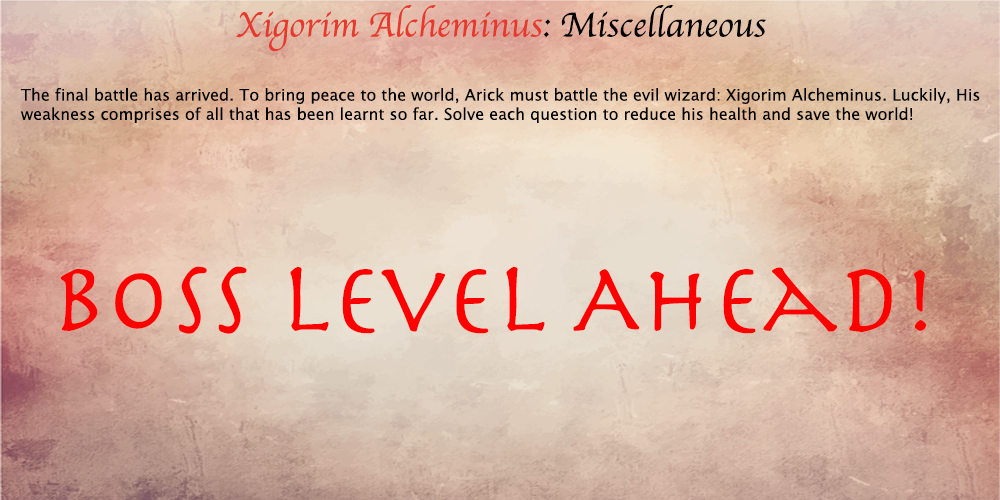
<style>
.page{position:relative;width:1000px;height:500px}
.page>*{position:absolute;margin:0}
.t1{font:36px "Apple-Chancery";color:#e63a2e}
.t2{font:36px "Apple-Chancery";color:#000000}
.t3{font:16px "LucidaGrande";color:#000100}
.t4{font:102.3px "Herculanum";color:#ff0000}
</style>
<div class="page">
<p class="t1" style="left:236px;top:5px;width:530px;height:47px">Xigorim Alcheminus<span class="t2">: Miscellaneous</span></p>
<p class="t3" style="left:20px;top:88px;width:960px;height:35px">The final battle has arrived. To bring peace to the world, Arick must battle the evil wizard: Xigorim Alcheminus. Luckily, His <br>weakness comprises of all that has been learnt so far. Solve each question to reduce his health and save the world!</p>
<p class="t4" style="left:60px;top:266px;width:867px;height:68px">BOSS Level Ahead!</p>
</div>
